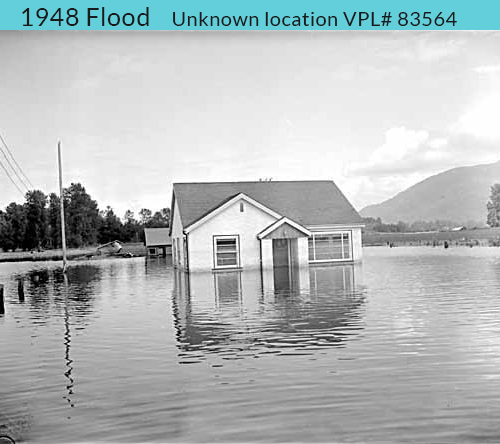
<style>
.page{position:relative;width:500px;height:444px}
.page>*{position:absolute;margin:0}
.t1{font:25px "Lato-Regular";letter-spacing:0.025em;color:#1a1a1a}
.t2{font:20px "Lato-Regular";letter-spacing:0.025em;color:#1a1a1a}
</style>
<div class="page">
<p class="t1" style="left:22px;top:7px;width:127px;height:19px">1948 Flood</p>
<p class="t2" style="left:173px;top:12px;width:284px;height:14px">Unknown location VPL# 83564</p>
</div>
